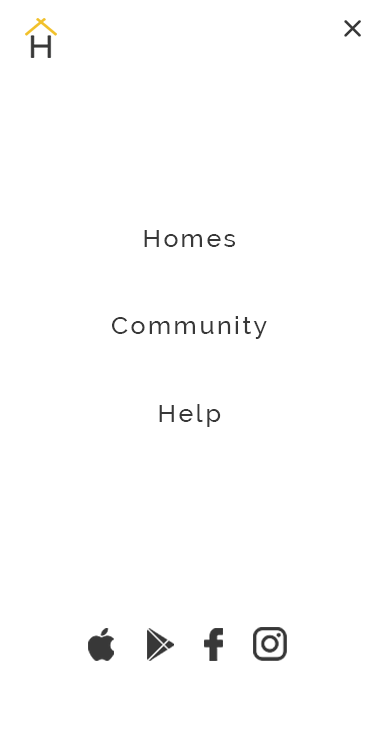
<style>
.page{position:relative;width:375px;height:750px;background:#ffffff}
.page>*{position:absolute;margin:0}
.t1{font:25px/87.4px "Raleway-Medium";letter-spacing:0.1em;color:#383838}
</style>
<div class="page">
<p class="t1" style="left:112px;top:230px;width:155px;height:197px;text-align:center">Homes<br>Community<br>Help</p>
</div>
